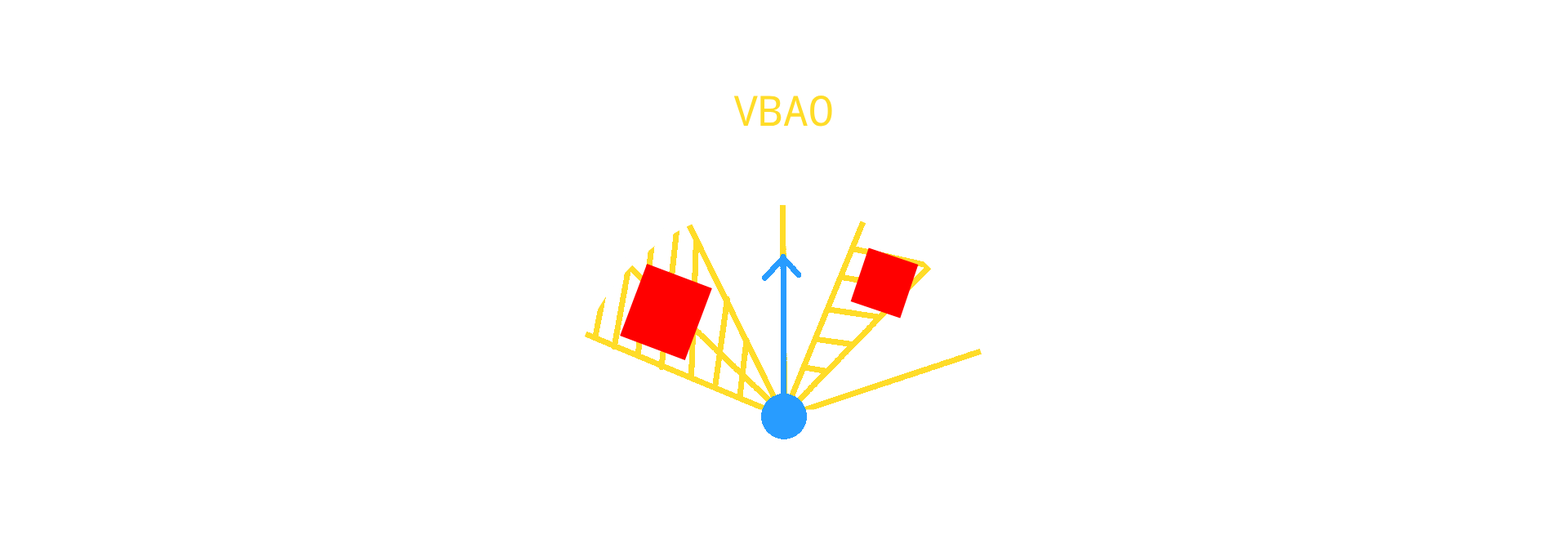
<style>
.page{position:relative;width:1568px;height:557px;background:#ffffff}
.page>*{position:absolute;margin:0}
.t1{font:41.6px "DroidSansMono";color:#ffdc28}
</style>
<div class="page">
<p class="t1" style="left:733px;top:96px;width:99px;height:31px">VBAO</p>
</div>
